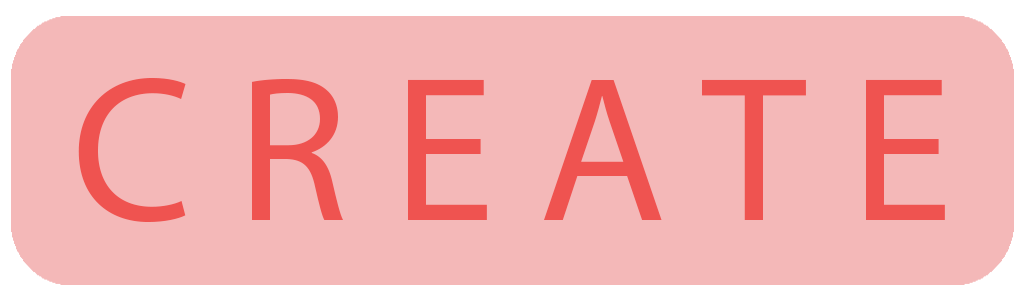
<style>
.page{position:relative;width:1024px;height:300px;background:#f4b8b8}
.page>*{position:absolute;margin:0}
.t1{font:208.3px "MyriadPro-Regular";color:#ef5350}
</style>
<div class="page">
<p class="t1" style="left:78px;top:77px;width:867px;height:145px">C R E A T E</p>
</div>
